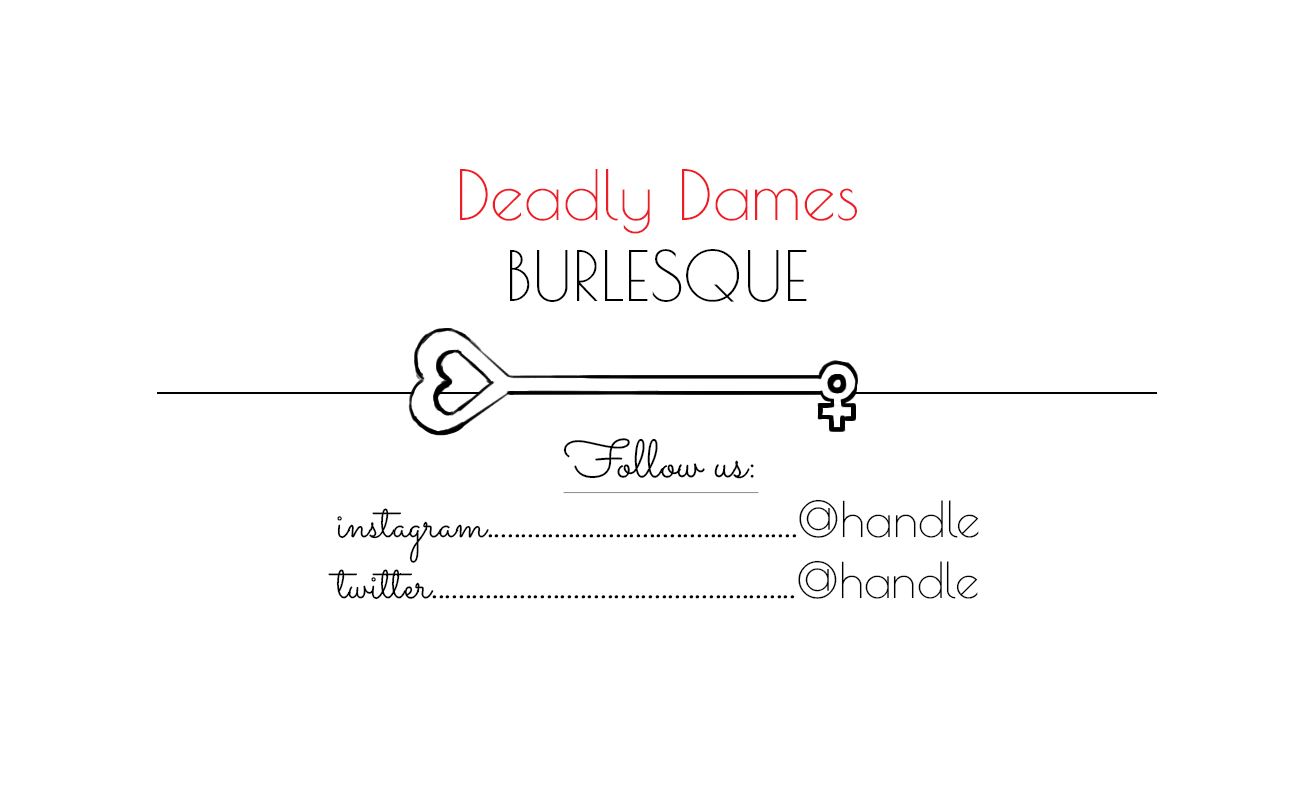
<style>
.page{position:relative;width:1313px;height:788px;background:#ffffff}
.page>*{position:absolute;margin:0}
.t1{font:68.1px "PoiretOne-Regular";color:#ee1c24}
.t2{font:68.1px "PoiretOne-Regular";color:#000000;text-transform:uppercase}
.t3{font:48.6px "PoiretOne-Regular";color:#000000}
.t4{font:53.5px "Sacramento-Regular";color:#000000;text-decoration:underline}
.t5{font:48.6px "Sacramento-Regular";color:#000000}
</style>
<div class="page">
<p class="t1" style="left:460px;top:169px;width:397px;height:133px;text-align:center">Deadly Dames<br><span class="t2">Burlesque</span></p>
<p class="t3" style="left:328px;top:438px;width:651px;height:162px;text-align:center"><span class="t4">Follow us:<br></span><span class="t5">instagram</span>..............................................@handle<br><span class="t5">twitter</span>......................................................@handle</p>
</div>
